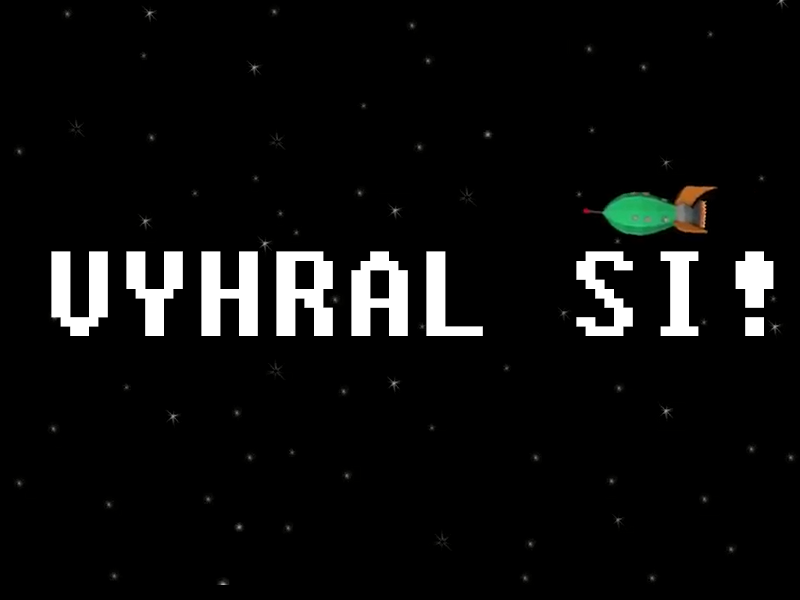
<style>
.page{position:relative;width:800px;height:600px;background:#000000}
.page>*{position:absolute;margin:0}
.t1{font:120px "Fixedsys";color:#ffffff}
</style>
<div class="page">
<p class="t1" style="left:51px;top:251px;width:723px;height:85px">VYHRAL SI!</p>
</div>
